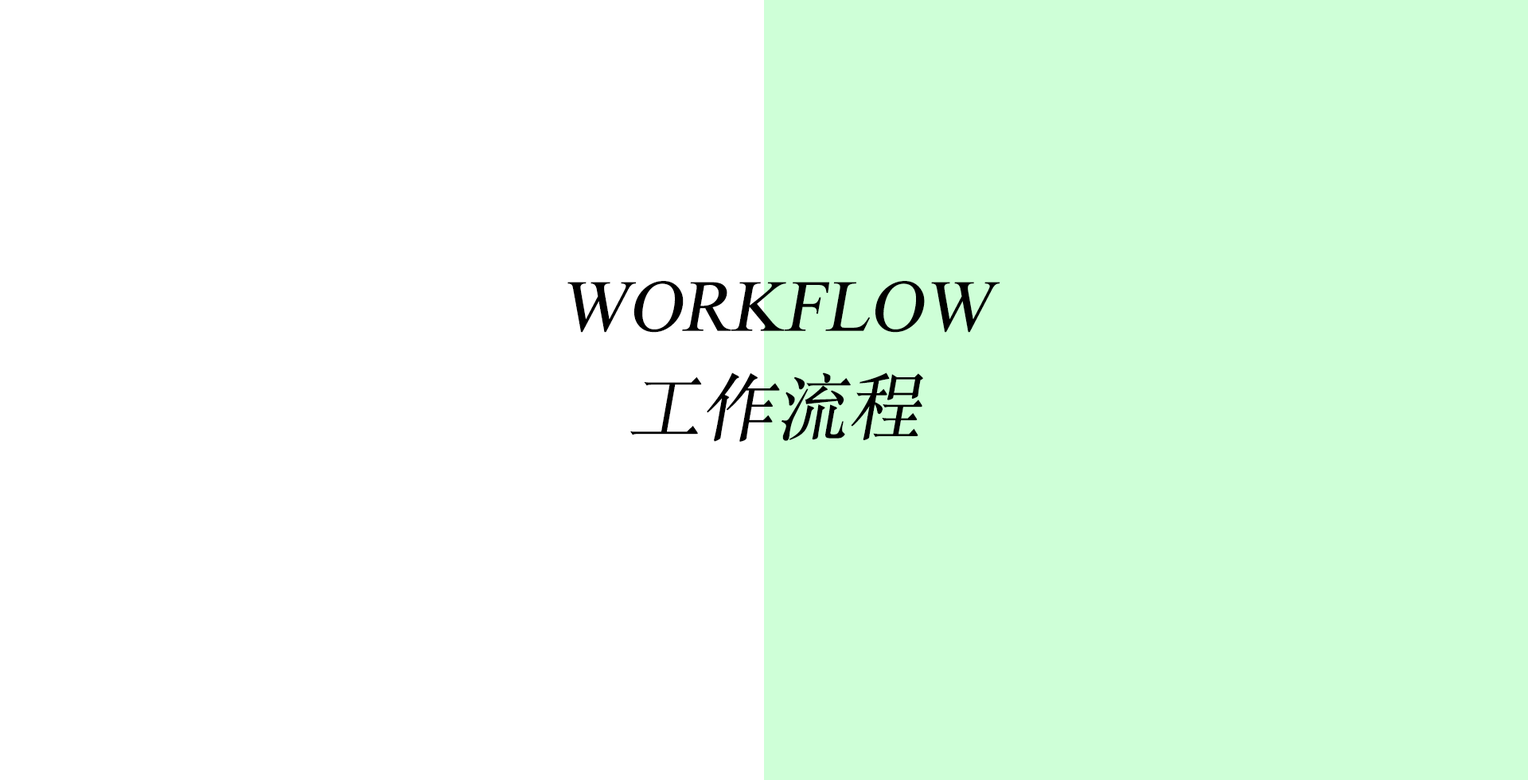
<style>
.page{position:relative;width:1528px;height:780px;background:#ffffff}
.page>*{position:absolute;margin:0}
.t1{font:73.6px "TimesNewRomanPSMT";color:#000000;font-style:italic}
.t2{font:73.6px "STSongti-SC-Regular";color:#000000;font-style:italic}
</style>
<div class="page">
<p class="t1" style="left:568px;top:281px;width:433px;height:161px;text-align:center">WORKFLOW<br><span class="t2">工作流程</span></p>
</div>
